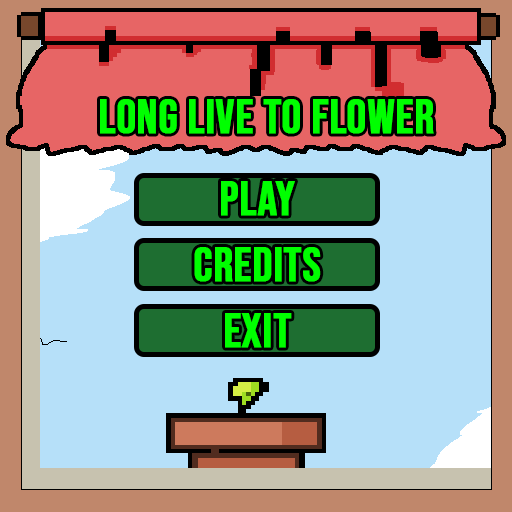
<style>
.page{position:relative;width:512px;height:512px;background:#b6e0f9}
.page>*{position:absolute;margin:0}
.t1{font:48px "BebasNeue-Regular";color:#00ff00;font-weight:bold}
</style>
<div class="page">
<p class="t1" style="left:100px;top:99px;width:334px;height:35px">LONG LIVE TO FLOWER</p>
<p class="t1" style="left:221px;top:181px;width:74px;height:35px">PLAY</p>
<p class="t1" style="left:194px;top:247px;width:127px;height:35px">credits</p>
<p class="t1" style="left:225px;top:313px;width:67px;height:35px">exit</p>
</div>
